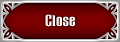
<style>
.page{position:relative;width:120px;height:42px}
.page>*{position:absolute;margin:0}
.t1{font:16px "Ravenscroft";color:#ffffff;scale:1.8 1}
</style>
<div class="page">
<p class="t1" style="left:45px;top:14px;width:30px;height:13px">Close</p>
</div>
